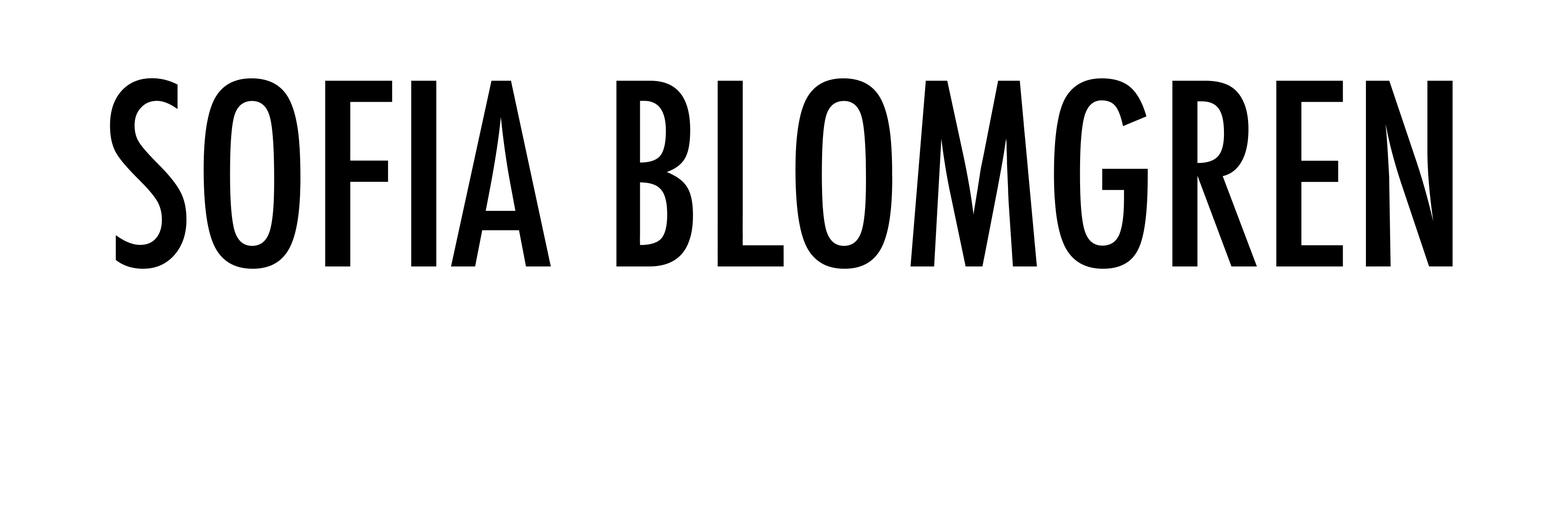
<style>
.page{position:relative;width:1568px;height:519px;background:#ffffff}
.page>*{position:absolute;margin:0}
.t1{font:246.4px "Futura-CondensedMedium";color:#000000}
</style>
<div class="page">
<p class="t1" style="left:110px;top:78px;width:1343px;height:191px">SOFIA BLOMGREN</p>
</div>
